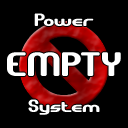
<style>
.page{position:relative;width:128px;height:128px;background:#000000}
.page>*{position:absolute;margin:0}
.t1{font:18px "GravitateBRK";color:#ffffff}
.t2{font:34px "GravitateBRK";color:#ffffff}
</style>
<div class="page">
<p class="t1" style="left:34px;top:13px;width:60px;height:13px">Power</p>
<p class="t2" style="left:7px;top:52px;width:114px;height:24px">EMPTY</p>
<p class="t1" style="left:28px;top:99px;width:72px;height:16px">System</p>
</div>
